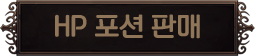
<style>
.page{position:relative;width:255px;height:56px}
.page>*{position:absolute;margin:0}
.t1{font:25px "KoreanNGL3-R";color:#907659}
</style>
<div class="page">
<p class="t1" style="left:55px;top:14px;width:145px;height:25px">HP 포션 판매</p>
</div>
